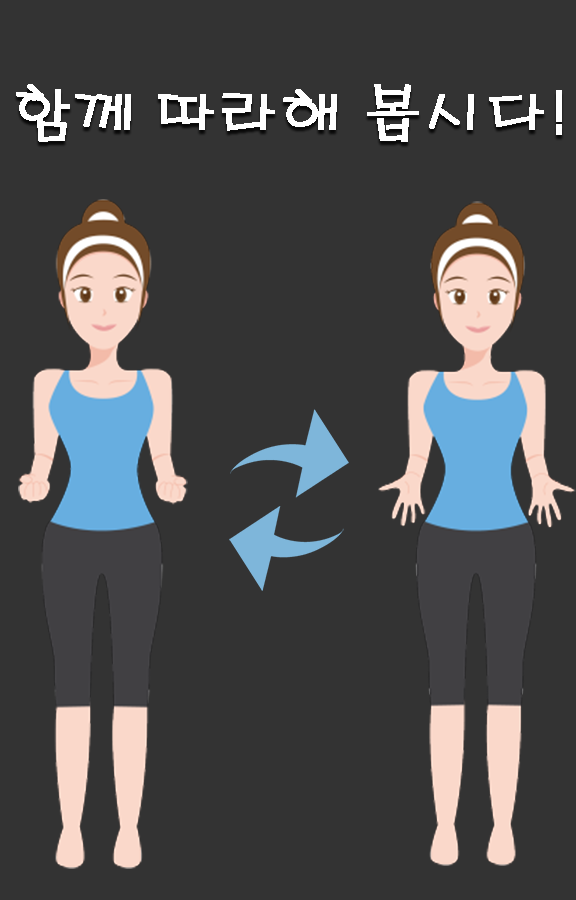
<style>
.page{position:relative;width:576px;height:900px;background:#333333}
.page>*{position:absolute;margin:0}
.t1{font:60px "H2porL";color:#ffffff;font-weight:bold}
</style>
<div class="page">
<p class="t1" style="left:16px;top:84px;width:546px;height:58px">함께 따라해 봅시다!</p>
</div>
